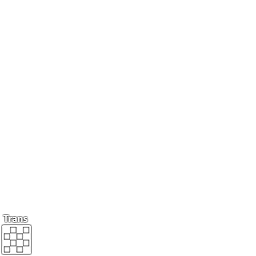
<style>
.page{position:relative;width:256px;height:256px;background:#ffffff}
.page>*{position:absolute;margin:0}
.t1{font:11px "Calibri-Bold";color:#ffffff}
</style>
<div class="page">
<p class="t1" style="left:3px;top:215px;width:25px;height:7px">Trans</p>
</div>
